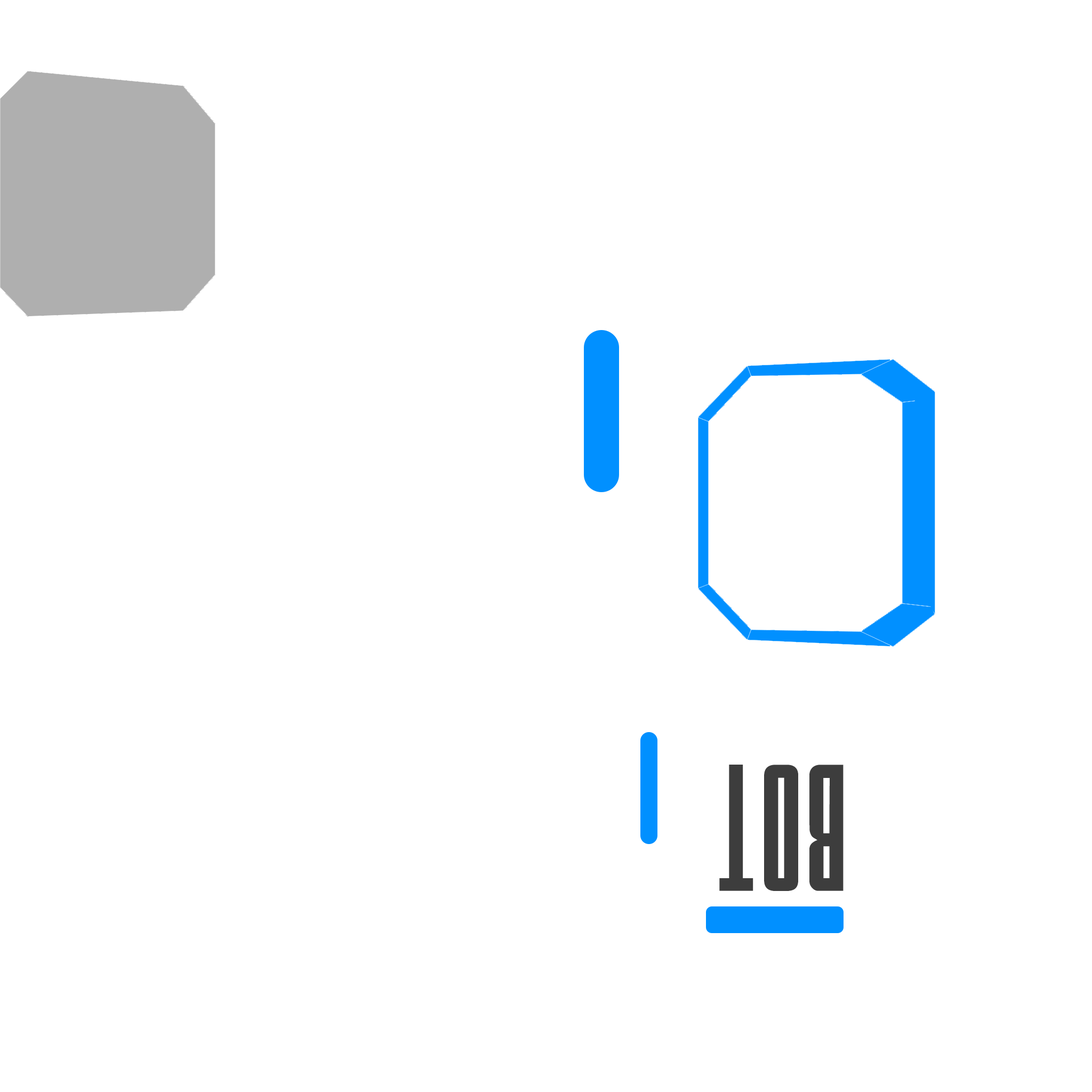
<style>
.page{position:relative;width:1092px;height:1092px;background:#ffffff}
.page>*{position:absolute;margin:0}
.t1{font:140.1px "Sacco-SemiBoldCondensed";color:#3d3d3d}
</style>
<div class="page">
<p class="t1" style="left:719px;top:765px;width:125px;height:126px;rotate:180deg">BOT</p>
</div>
